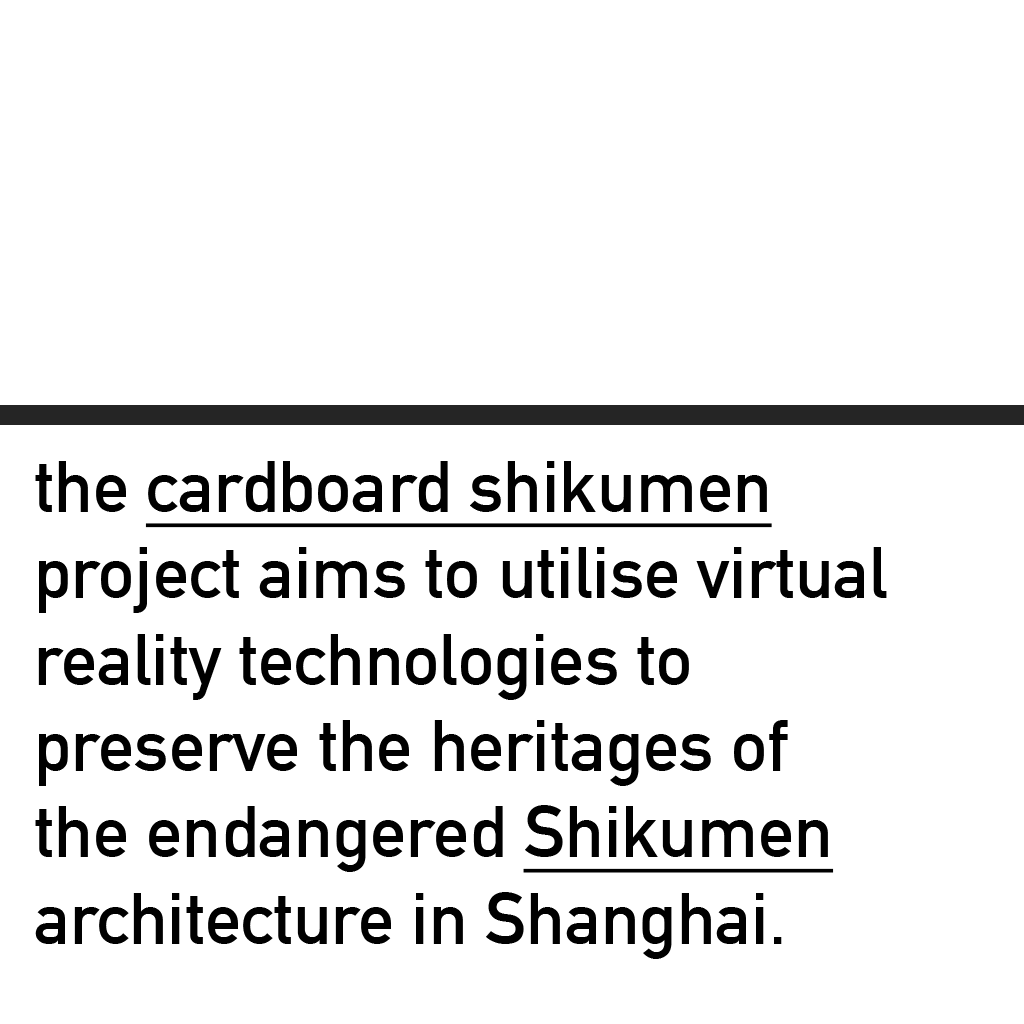
<style>
.page{position:relative;width:1024px;height:1024px;background:#ffffff}
.page>*{position:absolute;margin:0}
.t1{font:72px "DINAlternate-Bold";color:#000000}
.t2{font:72px "DINAlternate-Bold";color:#000000;text-decoration:underline}
</style>
<div class="page">
<p class="t1" style="left:35px;top:461px;width:852px;height:498px">the <span class="t2">cardboard shikumen<br></span>project aims to utilise virtual<br>reality technologies to <br>preserve the heritages of <br>the endangered <span class="t2">Shikumen <br></span>architecture in Shanghai.</p>
</div>
